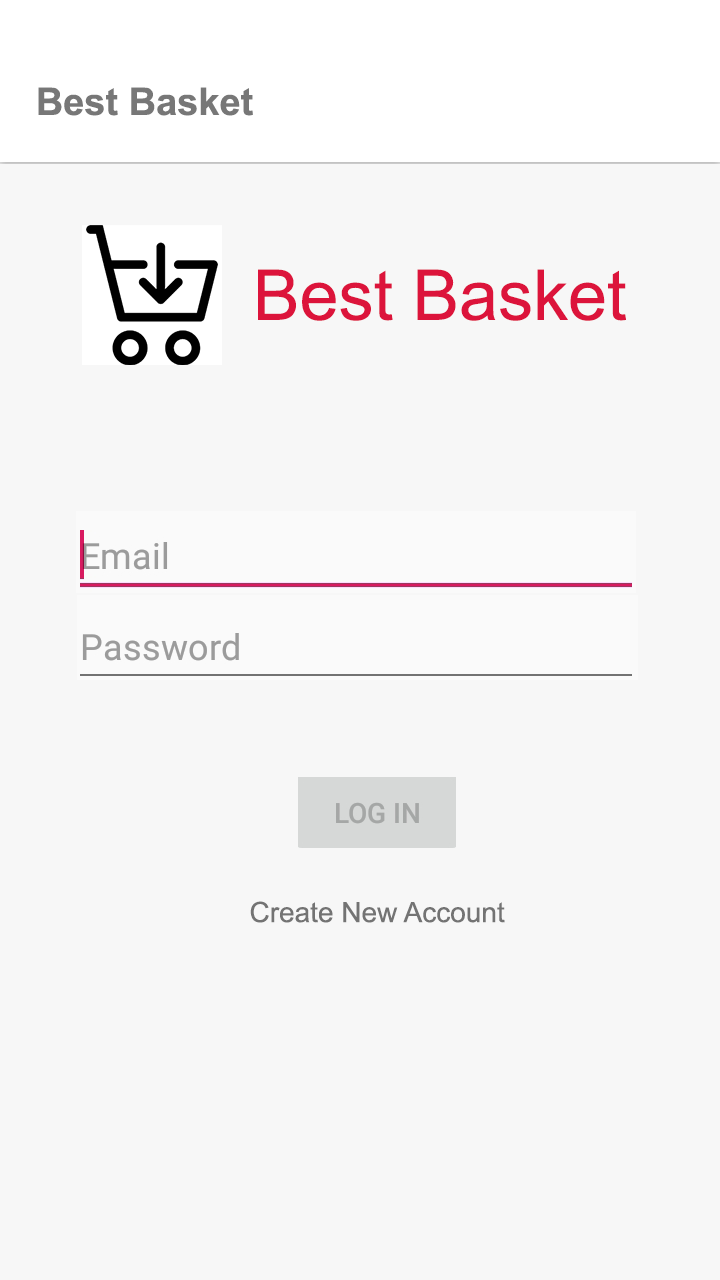
<style>
.page{position:relative;width:720px;height:1280px;background:#f7f7f7}
.page>*{position:absolute;margin:0}
.t1{font:38px "Arial-BoldMT";color:#777777}
.t2{font:70px "ArialMT";color:#dc143b}
.t3{font:28px "ArialMT";color:#737373}
</style>
<div class="page">
<p class="t1" style="left:38px;top:87px;width:215px;height:29px">Best Basket</p>
<p class="t2" style="left:258px;top:269px;width:368px;height:52px">Best Basket</p>
<p class="t3" style="left:250px;top:901px;width:255px;height:22px">Create New Account</p>
</div>
